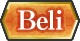
<style>
.page{position:relative;width:80px;height:41px}
.page>*{position:absolute;margin:0}
.t1{font:26px "RyuminPro-ExBold";letter-spacing:-0.04em;color:#fffffa}
</style>
<div class="page">
<p class="t1" style="left:18px;top:10px;width:45px;height:20px">Beli</p>
</div>
